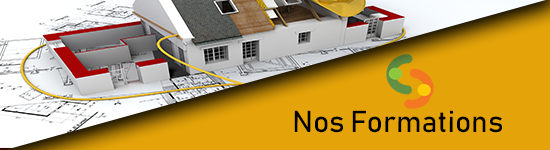
<style>
.page{position:relative;width:550px;height:150px;background:#e4a409}
.page>*{position:absolute;margin:0}
.t1{font:30px "Bahnschrift";color:#000000}
</style>
<div class="page">
<p class="t1" style="left:294px;top:110px;width:208px;height:23px">Nos Formations</p>
</div>
